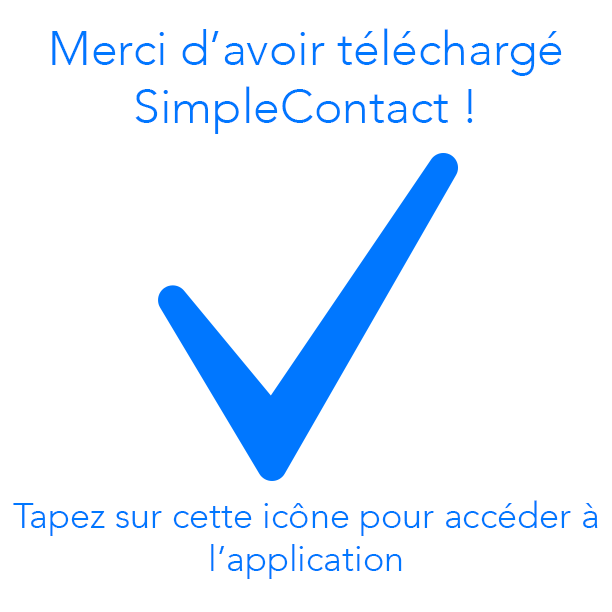
<style>
.page{position:relative;width:612px;height:612px;background:#ffffff}
.page>*{position:absolute;margin:0}
.t1{font:48px "Avenir-Light";color:#0077ff}
.t2{font:36px "Avenir-Light";color:#0077ff}
</style>
<div class="page">
<p class="t1" style="left:52px;top:28px;width:510px;height:106px;text-align:center">Merci d’avoir téléchargé SimpleContact !</p>
<p class="t2" style="left:13px;top:500px;width:585px;height:79px;text-align:center">Tapez sur cette icône pour accéder à l’application</p>
</div>
